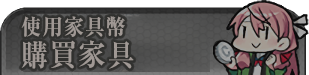
<style>
.page{position:relative;width:309px;height:75px}
.page>*{position:absolute;margin:0}
.t1{font:22px/24px "RyuminPro-ExBold";letter-spacing:0.1em;color:#a09894;scale:0.9 1}
.t2{font:30px/24px "RyuminPro-ExBold";letter-spacing:0.1em;color:#a09894;scale:0.9 1}
</style>
<div class="page">
<p class="t1" style="left:21px;top:16px;width:113px;height:53px">使用家具幣 <br><span class="t2">購買家具</span></p>
</div>
